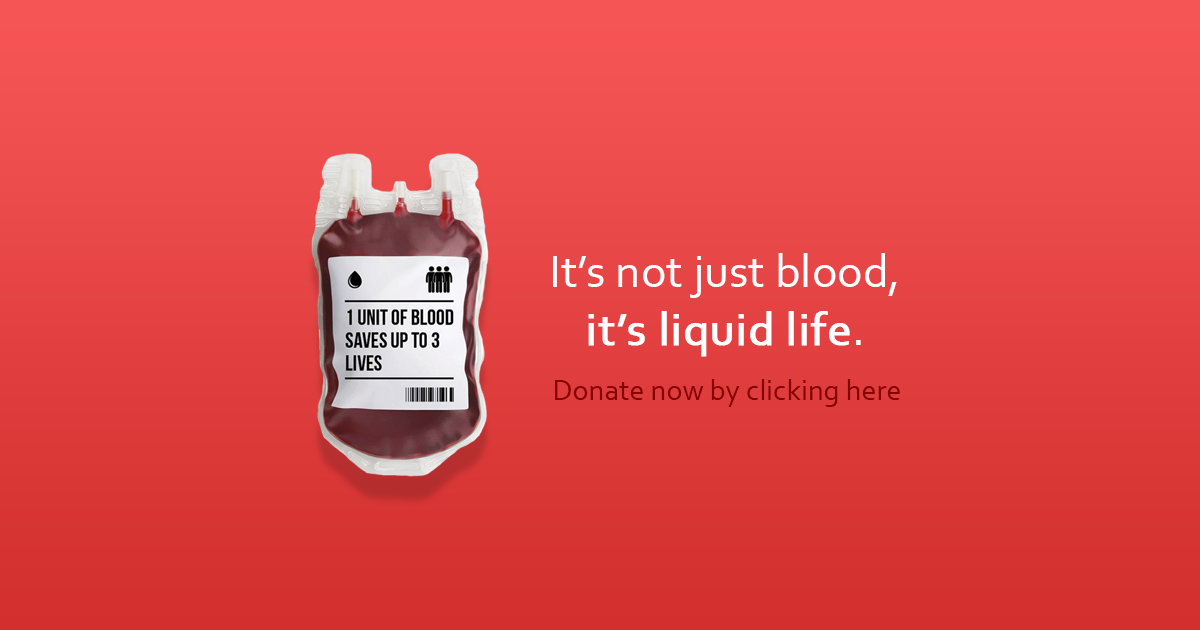
<style>
.page{position:relative;width:1200px;height:630px}
.page>*{position:absolute;margin:0}
.t1{font:48px "Corbel";color:#ffffff}
.t2{font:48px "Corbel";color:#ffffff;font-weight:bold}
.t3{font:30px "Corbel";color:#860000}
</style>
<div class="page">
<p class="t1" style="left:553px;top:253px;width:344px;height:104px;text-align:center">It’s not just blood,<br><span class="t2">it’s liquid life</span>.</p>
<p class="t3" style="left:555px;top:379px;width:345px;height:28px">Donate now by clicking here</p>
</div>
